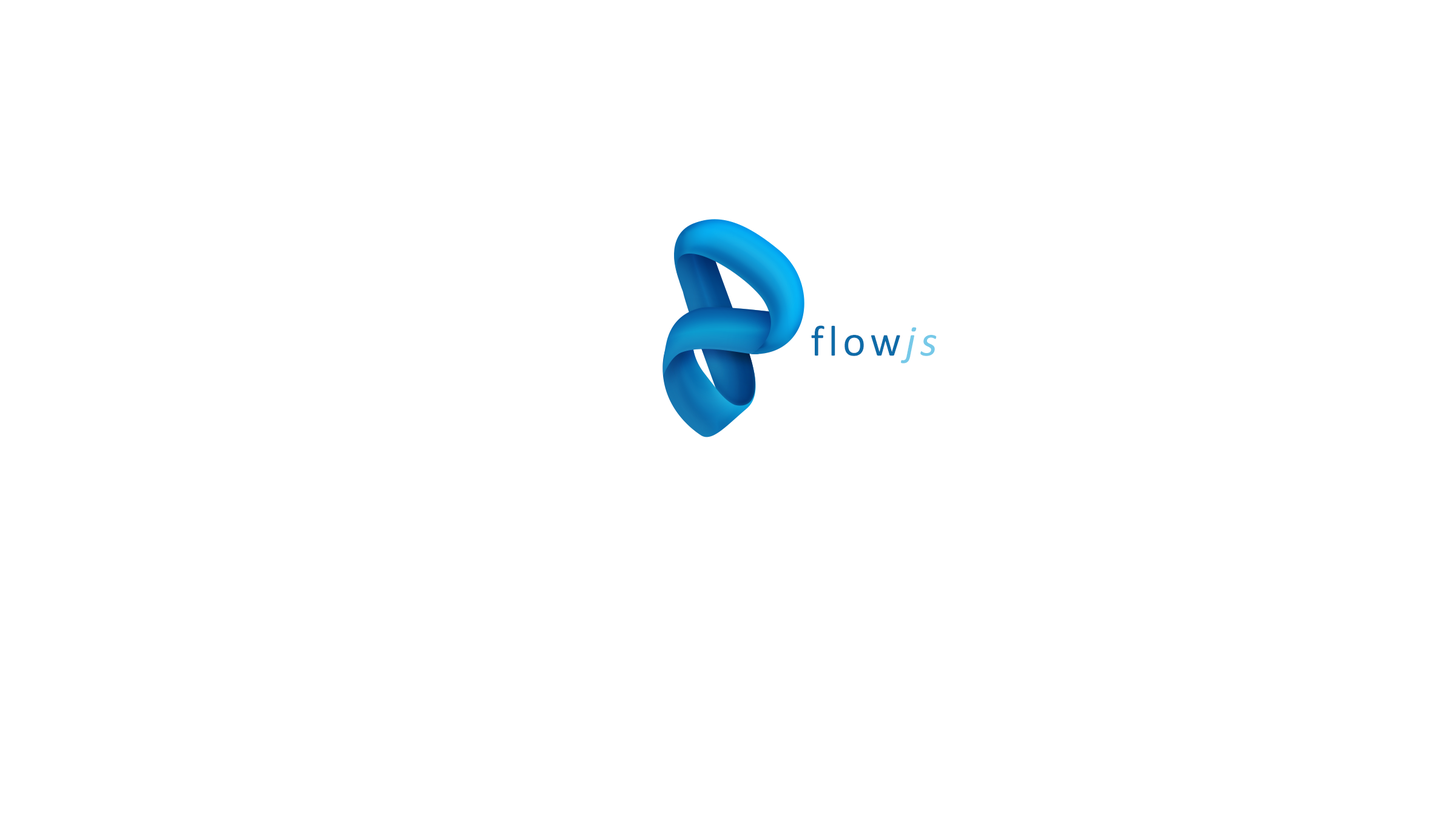
<style>
.page{position:relative;width:1456px;height:819px;background:#ffffff}
.page>*{position:absolute;margin:0}
.t1{font:43.7px "Calibri";letter-spacing:0.1em;color:#0e6ba8}
.t2{font:43.7px "Calibri-Italic";letter-spacing:0.1em;color:#76c9e8}
</style>
<div class="page">
<p class="t1" style="left:811px;top:325px;width:126px;height:38px">flow<span class="t2">js</span></p>
</div>
